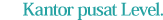
<style>
.page{position:relative;width:163px;height:20px;background:#ffffff}
.page>*{position:absolute;margin:0}
.t1{font:18px "HeiseiMinStd-W7";letter-spacing:-0.04em;color:#25a2a2}
</style>
<div class="page">
<p class="t1" style="left:23px;top:2px;width:140px;height:18px">Kantor pusat Level.</p>
</div>
